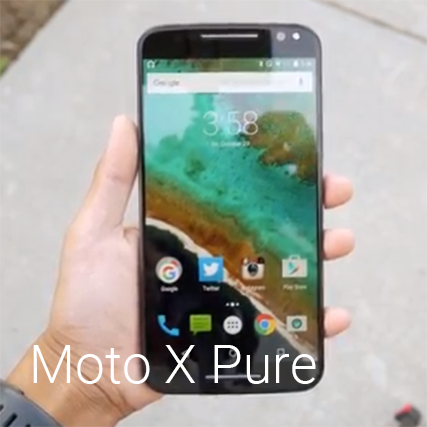
<style>
.page{position:relative;width:427px;height:427px}
.page>*{position:absolute;margin:0}
.t1{font:53.3px "Roboto-Light";color:#ffffff}
</style>
<div class="page">
<p class="t1" style="left:33px;top:345px;width:283px;height:39px">Moto X Pure</p>
</div>
